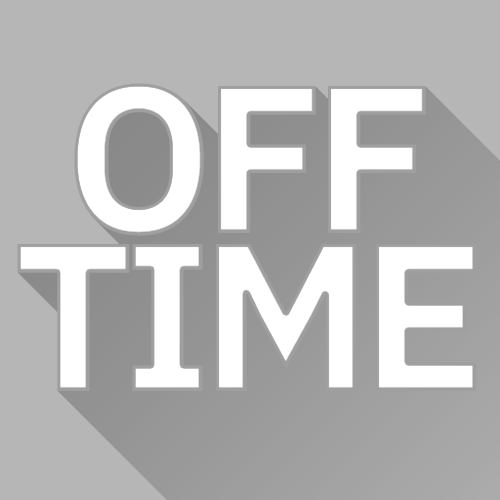
<style>
.page{position:relative;width:500px;height:500px;background:#b6b6b6}
.page>*{position:absolute;margin:0}
.t1{font:210.4px/158.5px "IBMPlexSansKR-Bold";letter-spacing:-0.06em;color:#ffffff}
</style>
<div class="page">
<p class="t1" style="left:17px;top:83px;width:460px;height:308px;text-align:center">OFF<br>TIME</p>
</div>
